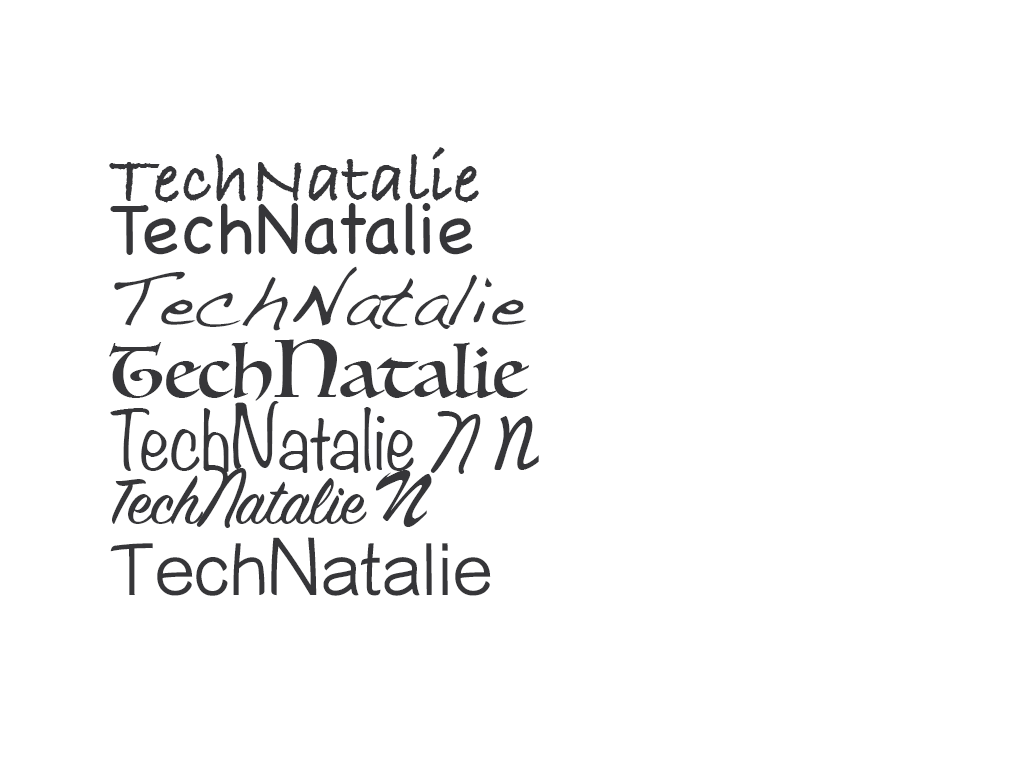
<style>
.page{position:relative;width:1024px;height:768px;background:#ffffff}
.page>*{position:absolute;margin:0}
.t1{font:72px/18px "BradleyHandITCTT-Bold";color:#363639}
.t2{font:72px/18px "Chalkboard";color:#363639}
.t3{font:72px/18px "Handwriting-Dakota";color:#363639}
.t4{font:80px/18px "Handwriting-Dakota";color:#363639}
.t5{font:72px/18px "Luminari-Regular";color:#363639}
.t6{font:80px/18px "Luminari-Regular";color:#363639}
.t7{font:72px/18px "Noteworthy-Light";color:#363639}
.t8{font:80px/18px "Noteworthy-Light";color:#363639}
.t9{font:80px/18px "Rebecca";color:#363639}
.t10{font:80px/18px "JCfg";color:#363639}
.t11{font:72px/18px "SignPainter-HouseScript";color:#363639}
.t12{font:80px/18px "STXingkai-SC-Bold";color:#363639}
.t13{font:72px/18px "YuppySC-Regular";color:#363639}
.t14{font:80px/18px "YuppySC-Regular";color:#363639}
</style>
<div class="page">
<p class="t1" style="left:109px;top:147px;width:430px;height:449px">TechNatalie<br><br><br><span class="t2">TechNatalie<br><br><br><br></span><span class="t3">Tech</span><span class="t4">N</span><span class="t3">atalie<br><br><br><br></span><span class="t5">Tech</span><span class="t6">N</span><span class="t5">atalie<br><br><br><br></span><span class="t7">Tech</span><span class="t8">N</span><span class="t7">atalie </span><span class="t9">N </span><span class="t10">N<br> <br> <br></span><span class="t11">Tech</span><span class="t9">N</span><span class="t11">atalie </span><span class="t12">N<br><br><br><br></span><span class="t13">Tech</span><span class="t14">N</span><span class="t13">atalie</span></p>
</div>
